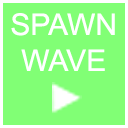
<style>
.page{position:relative;width:128px;height:128px;background:#81ff75}
.page>*{position:absolute;margin:0}
.t1{font:30px "ArialMT";color:#ffffff}
</style>
<div class="page">
<p class="t1" style="left:11px;top:13px;width:104px;height:58px;text-align:center">SPAWN<br>WAVE</p>
</div>
